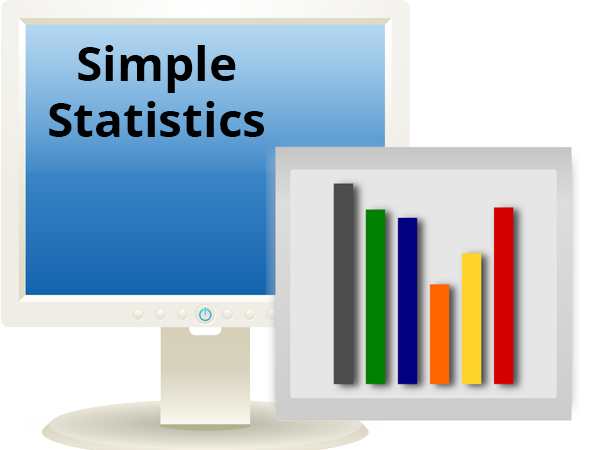
<style>
.page{position:relative;width:600px;height:450px;background:#ffffff}
.page>*{position:absolute;margin:0}
.t1{font:48px/56px "OpenSans-Bold";color:#000000}
</style>
<div class="page">
<p class="t1" style="left:49px;top:45px;width:215px;height:92px;text-align:center">Simple<br>Statistics</p>
</div>
